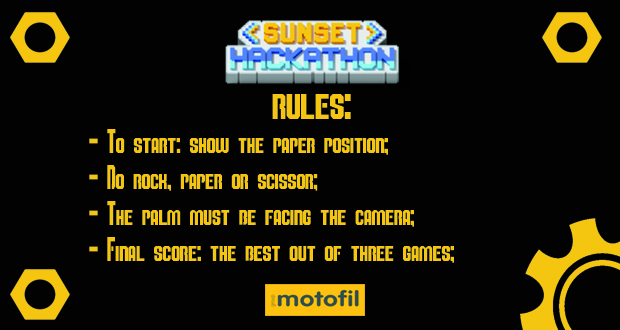
<style>
.page{position:relative;width:620px;height:330px;background:#020202}
.page>*{position:absolute;margin:0}
.t1{font:50px "SuperMarioBrosAlphabet";color:#f5c50f}
.t2{font:30px "SuperMarioBrosAlphabet";color:#f5c50f}
</style>
<div class="page">
<p class="t1" style="left:272px;top:94px;width:79px;height:25px">rules:</p>
<p class="t2" style="left:89px;top:129px;width:365px;height:134px"><span class="t1"><br></span>- To start: show the paper position;<br>- Do rock, paper or scissor;<br>- The palm must be facing the camera;<br>- Final score: the best out of three games;</p>
</div>
